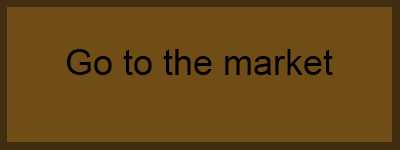
<style>
.page{position:relative;width:400px;height:150px;background:#704c16}
.page>*{position:absolute;margin:0}
.t1{font:36px "ArialMT";color:#000000}
</style>
<div class="page">
<p class="t1" style="left:66px;top:49px;width:267px;height:26px">Go to the market</p>
</div>
